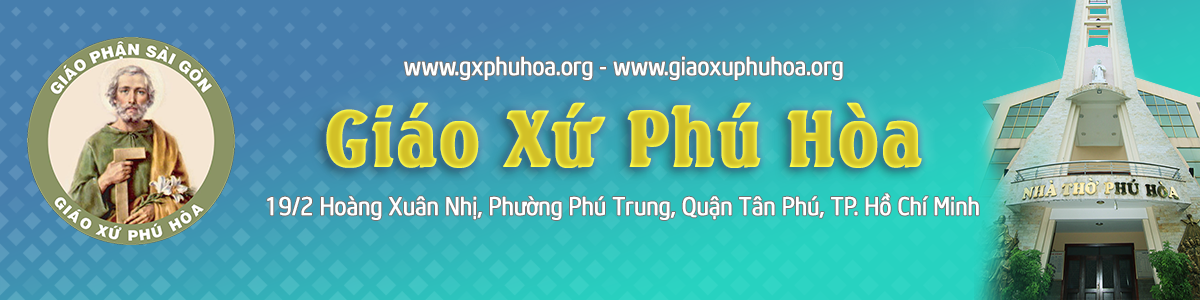
<style>
.page{position:relative;width:1200px;height:300px}
.page>*{position:absolute;margin:0}
.t1{font:24.2px "UTM-Neo-Sans-Intel";color:#ffffff;font-weight:bold;scale:0.91 1}
.t2{font:77px "UTMSeagullBold";color:#d2c027;font-weight:bold;scale:0.91 1}
</style>
<div class="page">
<p class="t1" style="left:404px;top:56px;width:439px;height:24px">www.gxphuhoa.org - www.giaoxuphuhoa.org</p>
<p class="t2" style="left:326px;top:102px;width:596px;height:66px">Giáo Xứ Phú Hòa</p>
<p class="t1" style="left:267px;top:193px;width:712px;height:27px">19/2 Hoàng Xuân Nhị, Phường Phú Trung, Quận Tân Phú, TP. Hồ Chí Minh</p>
</div>
